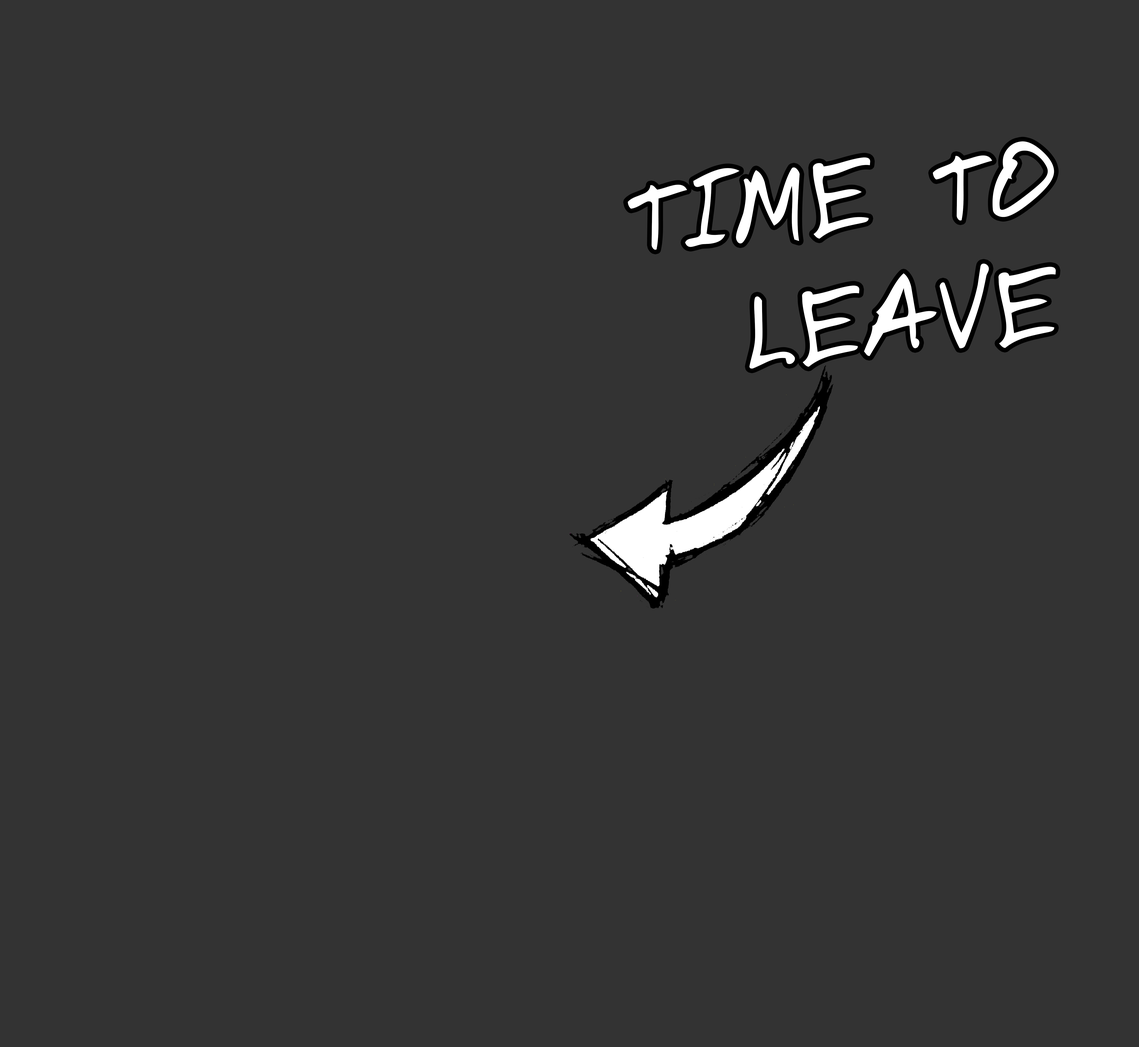
<style>
.page{position:relative;width:1139px;height:1047px;background:#333333}
.page>*{position:absolute;margin:0}
.t1{font:105.4px "DomesticManners";letter-spacing:0.04em;color:#ffffff}
</style>
<div class="page">
<p class="t1" style="left:627px;top:141px;width:428px;height:228px;rotate:-5deg">TIME TO<br>  LEAVE</p>
</div>
